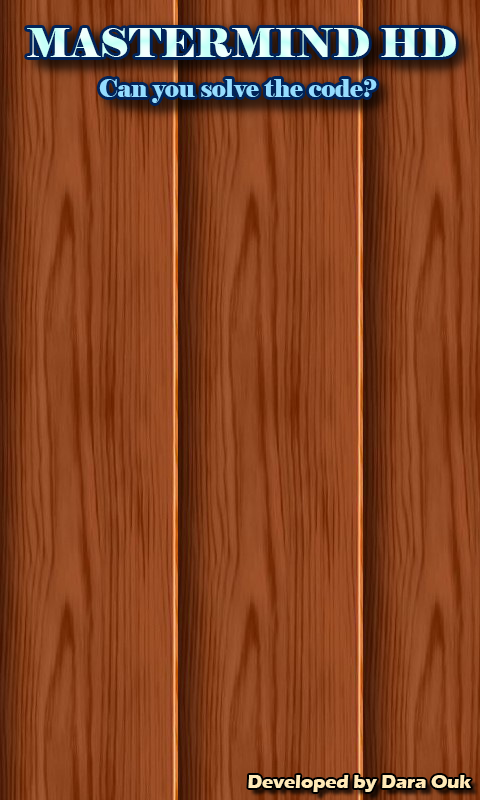
<style>
.page{position:relative;width:480px;height:800px}
.page>*{position:absolute;margin:0}
.t1{font:40px "Elephant-Regular";color:#dbfffa}
.t2{font:24px "Elephant-Regular";color:#95ddff}
.t3{font:18.7px "ErasITC-Bold";color:#ffeab8}
</style>
<div class="page">
<p class="t1" style="left:27px;top:28px;width:429px;height:29px">MASTERMIND HD</p>
<p class="t2" style="left:99px;top:79px;width:278px;height:24px">Can you solve the code?</p>
<p class="t3" style="left:248px;top:775px;width:223px;height:17px">Developed by Dara Ouk</p>
</div>
